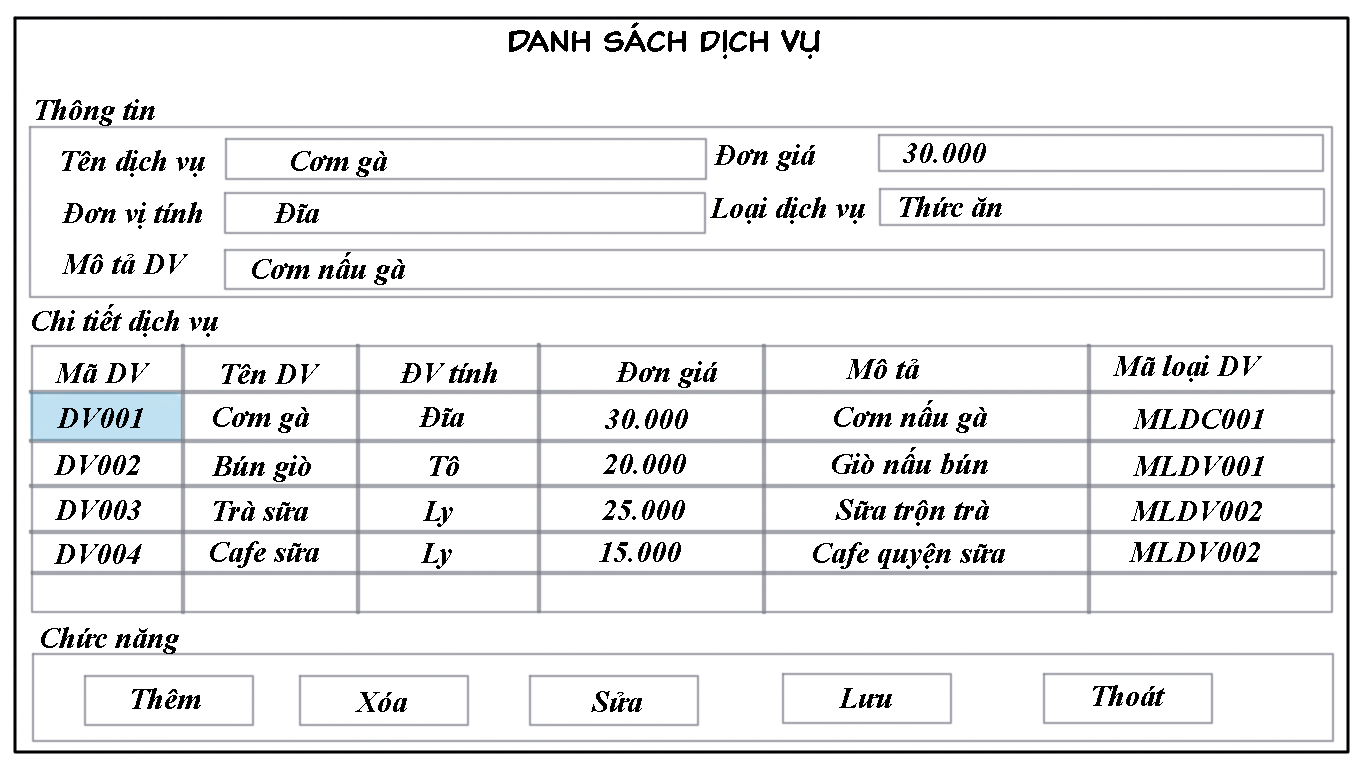
<style>
.page{position:relative;width:1366px;height:768px;background:#ffffff}
.page>*{position:absolute;margin:0}
.t1{font:30px "000ClassicComicTB-Normal";color:#000000}
.t2{font:30px "TimesNewRomanPS-BoldItalicMT";color:#000000}
</style>
<div class="page">
<p class="t1" style="left:509px;top:22px;width:311px;height:37px">Danh sách dịch vụ</p>
<p class="t2" style="left:36px;top:99px;width:119px;height:27px">Thông tin</p>
<p class="t2" style="left:62px;top:150px;width:143px;height:27px">Tên dịch vụ</p>
<p class="t2" style="left:714px;top:144px;width:101px;height:27px">Đơn giá</p>
<p class="t2" style="left:903px;top:143px;width:83px;height:20px">30.000</p>
<p class="t2" style="left:291px;top:151px;width:96px;height:26px">Cơm gà</p>
<p class="t2" style="left:710px;top:197px;width:155px;height:27px">Loại dịch vụ</p>
<p class="t2" style="left:900px;top:196px;width:102px;height:21px">Thức ăn</p>
<p class="t2" style="left:62px;top:202px;width:140px;height:27px">Đơn vị tính</p>
<p class="t2" style="left:274px;top:203px;width:45px;height:20px">Đĩa</p>
<p class="t2" style="left:62px;top:254px;width:126px;height:20px">Mô tả DV</p>
<p class="t2" style="left:252px;top:252px;width:153px;height:33px">Cơm nấu gà</p>
<p class="t2" style="left:32px;top:304px;width:186px;height:33px">Chi tiết dịch vụ</p>
<p class="t2" style="left:55px;top:363px;width:95px;height:20px">Mã DV</p>
<p class="t2" style="left:222px;top:364px;width:98px;height:20px">Tên DV</p>
<p class="t2" style="left:400px;top:362px;width:97px;height:21px">ĐV tính</p>
<p class="t2" style="left:616px;top:361px;width:101px;height:27px">Đơn giá</p>
<p class="t2" style="left:846px;top:359px;width:73px;height:20px">Mô tả</p>
<p class="t2" style="left:1113px;top:355px;width:149px;height:27px">Mã loại DV</p>
<p class="t2" style="left:834px;top:400px;width:153px;height:33px">Cơm nấu gà</p>
<p class="t2" style="left:57px;top:408px;width:86px;height:20px">DV001</p>
<p class="t2" style="left:213px;top:407px;width:96px;height:26px">Cơm gà</p>
<p class="t2" style="left:419px;top:407px;width:45px;height:20px">Đĩa</p>
<p class="t2" style="left:605px;top:409px;width:83px;height:20px">30.000</p>
<p class="t2" style="left:1133px;top:409px;width:131px;height:20px">MLDC001</p>
<p class="t2" style="left:832px;top:447px;width:156px;height:27px">Giò nấu bún</p>
<p class="t2" style="left:54px;top:455px;width:86px;height:20px">DV002</p>
<p class="t2" style="left:212px;top:455px;width:99px;height:27px">Bún giò</p>
<p class="t2" style="left:430px;top:456px;width:29px;height:20px">Tô</p>
<p class="t2" style="left:603px;top:454px;width:83px;height:20px">20.000</p>
<p class="t2" style="left:1133px;top:456px;width:131px;height:20px">MLDV001</p>
<p class="t2" style="left:55px;top:500px;width:86px;height:20px">DV003</p>
<p class="t2" style="left:214px;top:501px;width:94px;height:20px">Trà sữa</p>
<p class="t2" style="left:423px;top:501px;width:30px;height:26px">Ly</p>
<p class="t2" style="left:602px;top:500px;width:83px;height:20px">25.000</p>
<p class="t2" style="left:835px;top:499px;width:154px;height:27px">Sữa trộn trà</p>
<p class="t2" style="left:1131px;top:501px;width:131px;height:20px">MLDV002</p>
<p class="t2" style="left:54px;top:544px;width:88px;height:20px">DV004</p>
<p class="t2" style="left:210px;top:541px;width:109px;height:27px">Cafe sữa</p>
<p class="t2" style="left:421px;top:543px;width:31px;height:26px">Ly</p>
<p class="t2" style="left:599px;top:542px;width:82px;height:20px">15.000</p>
<p class="t2" style="left:813px;top:542px;width:192px;height:27px">Cafe quyện sữa</p>
<p class="t2" style="left:1129px;top:542px;width:131px;height:20px">MLDV002</p>
<p class="t2" style="left:41px;top:627px;width:138px;height:27px">Chức năng</p>
<p class="t2" style="left:132px;top:688px;width:69px;height:21px">Thêm</p>
<p class="t2" style="left:839px;top:688px;width:53px;height:20px">Lưu</p>
<p class="t2" style="left:1093px;top:685px;width:72px;height:21px">Thoát</p>
<p class="t2" style="left:355px;top:692px;width:52px;height:20px">Xóa</p>
<p class="t2" style="left:591px;top:691px;width:51px;height:21px">Sửa</p>
</div>
